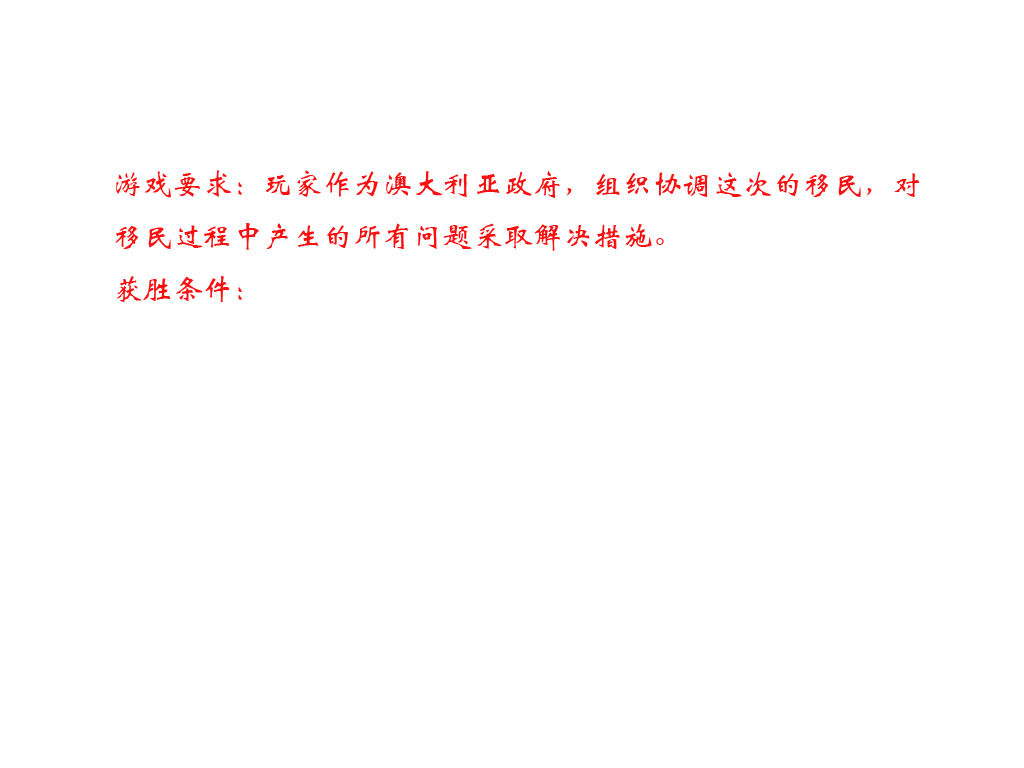
<style>
.page{position:relative;width:1024px;height:768px;background:#ffffff}
.page>*{position:absolute;margin:0}
.t1{font:30px "STXinwei";color:#f91010}
</style>
<div class="page">
<p class="t1" style="left:115px;top:170px;width:805px;height:132px">游戏要求：玩家作为澳大利亚政府，组织协调这次的移民，对移民过程中产生的所有问题采取解决措施。<br>获胜条件：</p>
</div>
